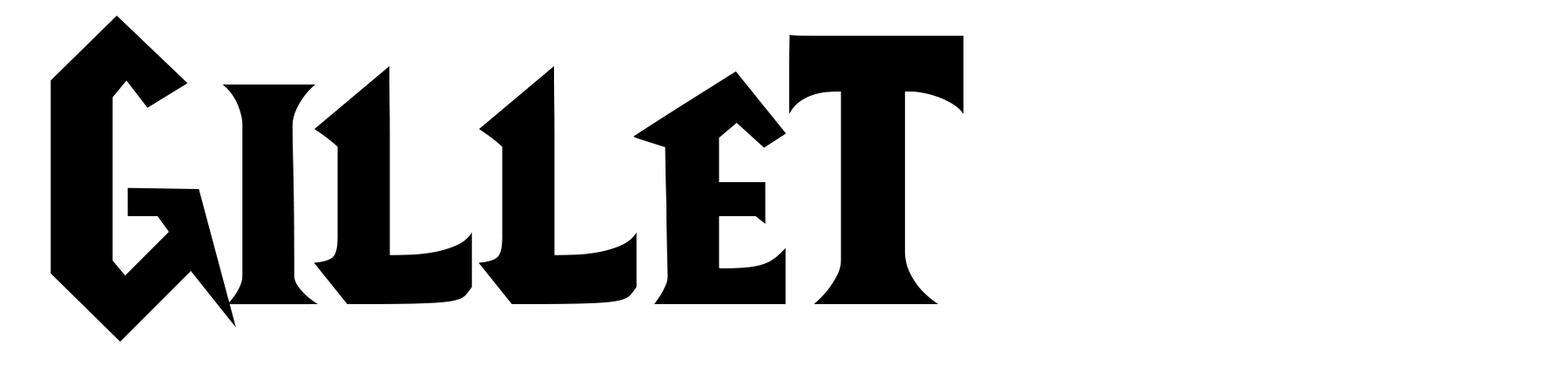
<style>
.page{position:relative;width:1568px;height:366px;background:#ffffff}
.page>*{position:absolute;margin:0}
.t1{font:383.3px "LifeCraft";color:#000000;scale:1.1 1}
</style>
<div class="page">
<p class="t1" style="left:51px;top:16px;width:912px;height:325px">GilleT</p>
</div>
